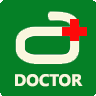
<style>
.page{position:relative;width:96px;height:96px;background:#058026}
.page>*{position:absolute;margin:0}
.t1{font:16.8px "NirmalaUI-Bold";color:#f9f6de}
</style>
<div class="page">
<p class="t1" style="left:15px;top:74px;width:68px;height:13px">DOCTOR</p>
</div>
